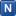
<style>
.page{position:relative;width:16px;height:16px}
.page>*{position:absolute;margin:0}
.t1{font:11px "HelveticaNeue-Medium";color:#f8f6f4}
</style>
<div class="page">
<p class="t1" style="left:4px;top:4px;width:8px;height:8px">N</p>
</div>
